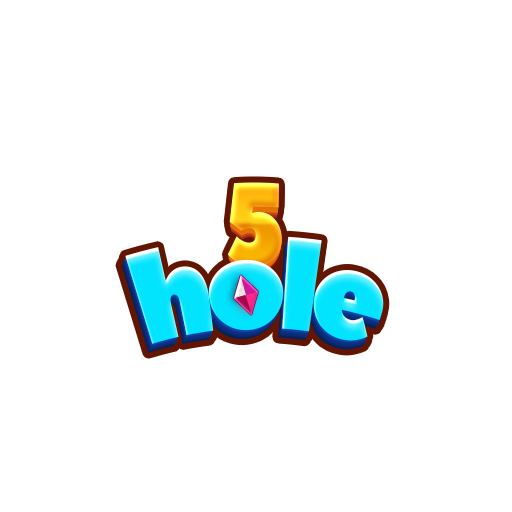
<style>
.page{position:relative;width:512px;height:512px;background:#ffffff}
.page>*{position:absolute;margin:0}
.t1{font:115px "PeaceSans";letter-spacing:-0.025em;scale:0.83 1}
.t2{font:113.9px "PeaceSans";letter-spacing:-0.025em;scale:0.83 1}
.t3{font:110.5px "PeaceSans";letter-spacing:-0.025em;scale:0.83 1}
.t4{font:111.6px "PeaceSans";letter-spacing:-0.025em;scale:0.83 1}
.t5{font:112.7px "PeaceSans";letter-spacing:-0.025em;scale:0.83 1}
.t6{font:107.2px "PeaceSans";letter-spacing:-0.025em;scale:0.83 1}
.t7{font:108.3px "PeaceSans";letter-spacing:-0.025em;scale:0.83 1}
.t8{font:109.4px "PeaceSans";letter-spacing:-0.025em;scale:0.83 1}
.t9{font:124.6px "PeaceSans";letter-spacing:-0.075em;color:#02e3fd;scale:0.77 1}
</style>
<div class="page">
<p class="t1" style="left:227px;top:182px;width:55px;height:85px">5</p>
<p class="t2" style="left:228px;top:184px;width:54px;height:85px">5</p>
<p class="t3" style="left:228px;top:190px;width:53px;height:82px">5</p>
<p class="t4" style="left:228px;top:188px;width:53px;height:83px">5</p>
<p class="t5" style="left:228px;top:187px;width:54px;height:83px">5</p>
<p class="t6" style="left:229px;top:194px;width:51px;height:79px">5</p>
<p class="t7" style="left:229px;top:193px;width:52px;height:80px">5</p>
<p class="t8" style="left:229px;top:191px;width:52px;height:81px">5</p>
<p class="t9" style="left:125px;top:236px;width:259px;height:108px">hole</p>
</div>
